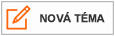
<style>
.page{position:relative;width:115px;height:36px;background:#fdfdfd}
.page>*{position:absolute;margin:0}
.t1{font:10.7px "Arial-BoldMT";letter-spacing:-0.01em;color:#333333;font-weight:bold}
</style>
<div class="page">
<p class="t1" style="left:40px;top:12px;width:65px;height:11px">NOVÁ TÉMA</p>
</div>
